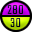
<style>
.page{position:relative;width:32px;height:32px}
.page>*{position:absolute;margin:0}
.t1{font:15px "Teko-Light";letter-spacing:0.035em;color:#01071a}
.t2{font:15px "Teko-Light";letter-spacing:0.035em}
</style>
<div class="page">
<p class="t1" style="left:7px;top:5px;width:16px;height:9px">280</p>
<p class="t2" style="left:10px;top:18px;width:10px;height:9px">20</p>
<p class="t1" style="left:10px;top:18px;width:11px;height:9px">30</p>
<p class="t2" style="left:11px;top:18px;width:9px;height:9px">25</p>
</div>
